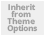
<style>
.page{position:relative;width:45px;height:36px;background:#efefef}
.page>*{position:absolute;margin:0}
.t1{font:8px/7px "OpenSans-Bold";color:#9f9f9f}
</style>
<div class="page">
<p class="t1" style="left:7px;top:3px;width:31px;height:31px;text-align:center">Inherit <br>from <br>Theme <br>Options</p>
</div>
